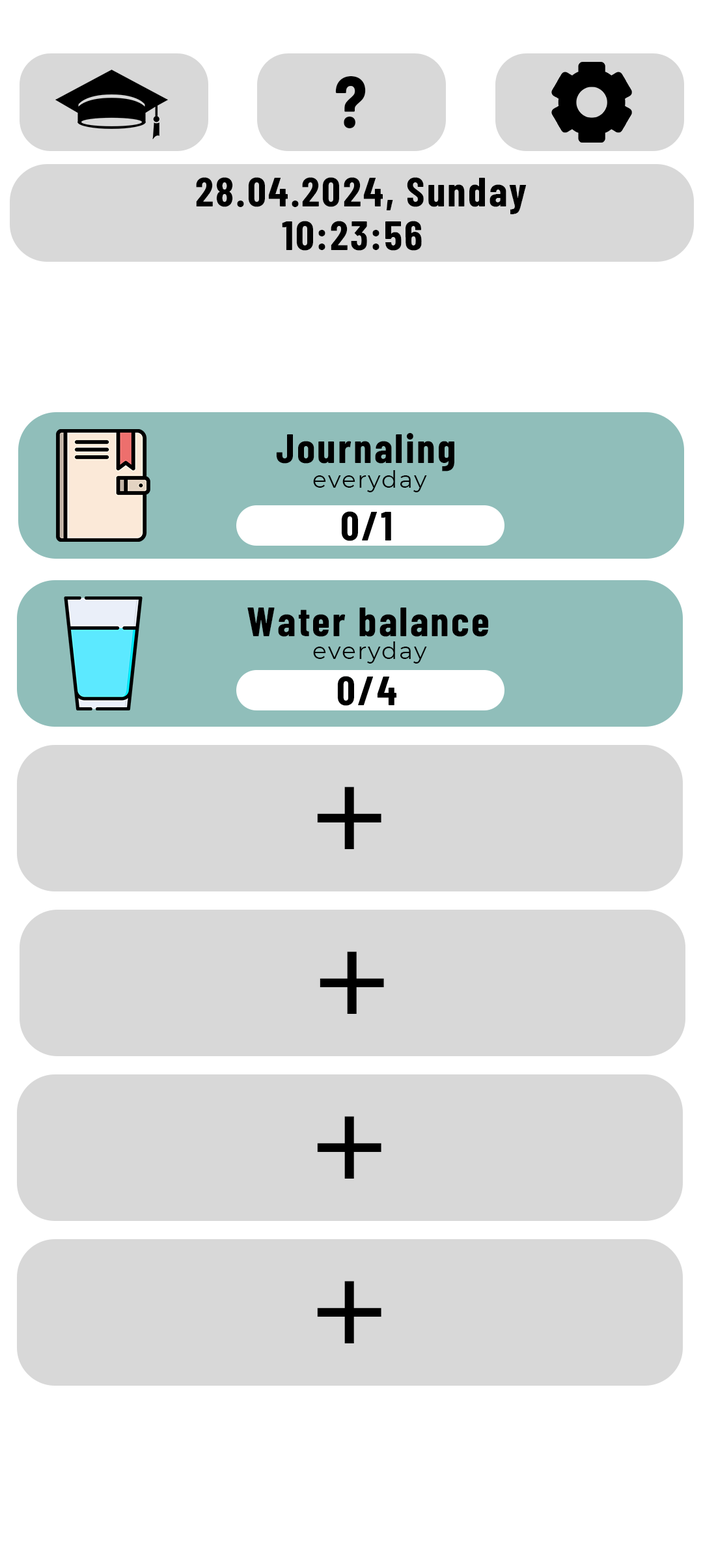
<style>
.page{position:relative;width:703px;height:1568px;background:#d8d8d8}
.page>*{position:absolute;margin:0}
.t1{font:73.3px "BarlowCondensed-Bold";letter-spacing:0.05em;color:#000000}
.t2{font:41.5px "BarlowCondensed-Bold";letter-spacing:0.05em;color:#000000}
.t3{font:23.4px "Montserrat-Regular";letter-spacing:0.05em;color:#000000}
.t4{font:146.5px "Montserrat-Regular";letter-spacing:0.05em;color:#000000}
</style>
<div class="page">
<p class="t1" style="left:335px;top:76px;width:31px;height:52px">?</p>
<p class="t2" style="left:196px;top:177px;width:331px;height:37px">28.04.2024, Sunday</p>
<p class="t2" style="left:282px;top:221px;width:140px;height:30px">10:23:56</p>
<p class="t2" style="left:276px;top:433px;width:179px;height:38px">Journaling</p>
<p class="t3" style="left:313px;top:470px;width:114px;height:22px">everyday</p>
<p class="t2" style="left:341px;top:511px;width:50px;height:30px">0/1</p>
<p class="t2" style="left:247px;top:608px;width:242px;height:29px">Water balance</p>
<p class="t3" style="left:313px;top:641px;width:114px;height:23px">everyday</p>
<p class="t2" style="left:337px;top:676px;width:60px;height:30px">0/4</p>
<p class="t4" style="left:317px;top:787px;width:65px;height:62px">+</p>
<p class="t4" style="left:320px;top:951px;width:64px;height:63px">+</p>
<p class="t4" style="left:317px;top:1116px;width:65px;height:63px">+</p>
<p class="t4" style="left:317px;top:1281px;width:65px;height:62px">+</p>
</div>
